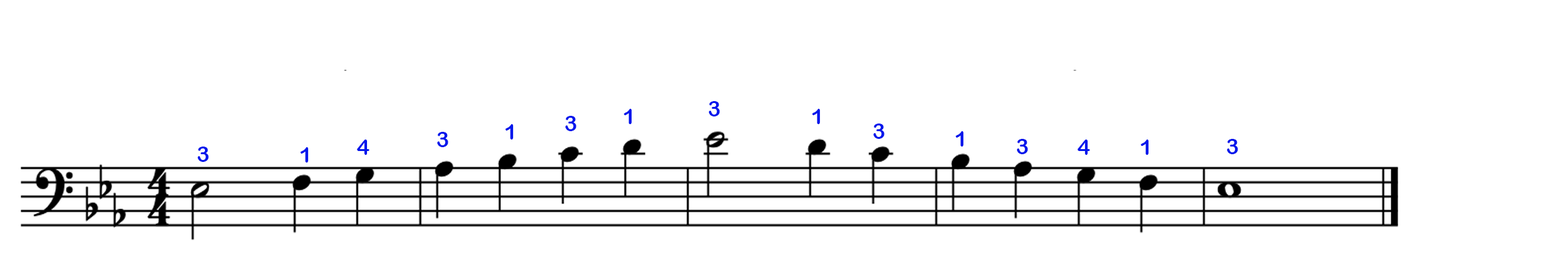
<style>
.page{position:relative;width:1568px;height:279px;background:#ffffff}
.page>*{position:absolute;margin:0}
.t1{font:21.8px "ArialRoundedMTBold";color:#0417ec}
</style>
<div class="page">
<p class="t1" style="left:708px;top:101px;width:12px;height:16px">3</p>
<p class="t1" style="left:624px;top:109px;width:8px;height:15px">1</p>
<p class="t1" style="left:812px;top:109px;width:9px;height:15px">1</p>
<p class="t1" style="left:505px;top:124px;width:9px;height:16px">1</p>
<p class="t1" style="left:565px;top:116px;width:11px;height:15px">3</p>
<p class="t1" style="left:873px;top:124px;width:12px;height:15px">3</p>
<p class="t1" style="left:437px;top:132px;width:11px;height:15px">3</p>
<p class="t1" style="left:956px;top:131px;width:8px;height:16px">1</p>
<p class="t1" style="left:197px;top:147px;width:12px;height:15px">3</p>
<p class="t1" style="left:300px;top:147px;width:9px;height:16px">1</p>
<p class="t1" style="left:357px;top:140px;width:13px;height:15px">4</p>
<p class="t1" style="left:1017px;top:139px;width:11px;height:15px">3</p>
<p class="t1" style="left:1077px;top:140px;width:13px;height:15px">4</p>
<p class="t1" style="left:1141px;top:140px;width:8px;height:15px">1</p>
<p class="t1" style="left:1227px;top:139px;width:11px;height:15px">3</p>
</div>
